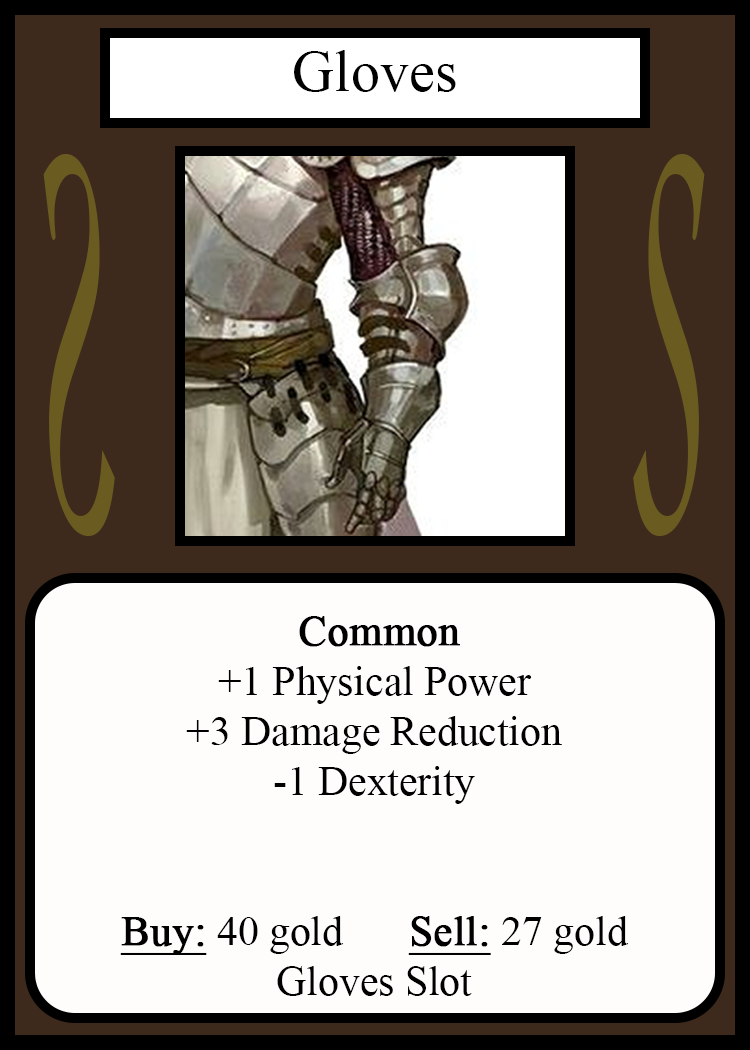
<style>
.page{position:relative;width:750px;height:1050px;background:#fffcfc}
.page>*{position:absolute;margin:0}
.t1{font:58.3px "TimesNewRomanPSMT";color:#010101}
.t2{font:548.5px "Apple-Chancery";color:#6a5c21;scale:0.27 1}
.t3{font:548.2px "Apple-Chancery";color:#6a5c21;scale:0.27 1}
.t4{font:41.7px "TimesNewRomanPSMT";color:#000000}
.t5{font:41.7px "TimesNewRomanPSMT";color:#000000;font-weight:bold}
.t6{font:41.7px "TimesNewRomanPSMT";color:#000000;font-weight:bold;text-decoration:underline}
</style>
<div class="page">
<p class="t1" style="left:294px;top:50px;width:162px;height:42px">Gloves</p>
<p class="t2" style="left:43px;top:154px;width:72px;height:382px;rotate:180deg">S</p>
<p class="t3" style="left:633px;top:154px;width:72px;height:382px">S</p>
<p class="t4" style="left:120px;top:616px;width:509px;height:380px;text-align:center"><span class="t5">Common</span><br>+1 Physical Power<br>+3 Damage Reduction<br>-1 Dexterity<br><br><br><span class="t6">Buy:</span> 40 gold   <span class="t6">Sell:</span> 27 gold<br>Gloves Slot</p>
</div>
